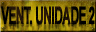
<style>
.page{position:relative;width:96px;height:32px}
.page>*{position:absolute;margin:0}
.t1{font:24px "Arial-BoldMT";letter-spacing:-0.04em;color:#000000;text-transform:uppercase;font-weight:bold;scale:0.47 1}
</style>
<div class="page">
<p class="t1" style="left:1px;top:6px;width:94px;height:19px">VENT. unidade 2</p>
</div>
